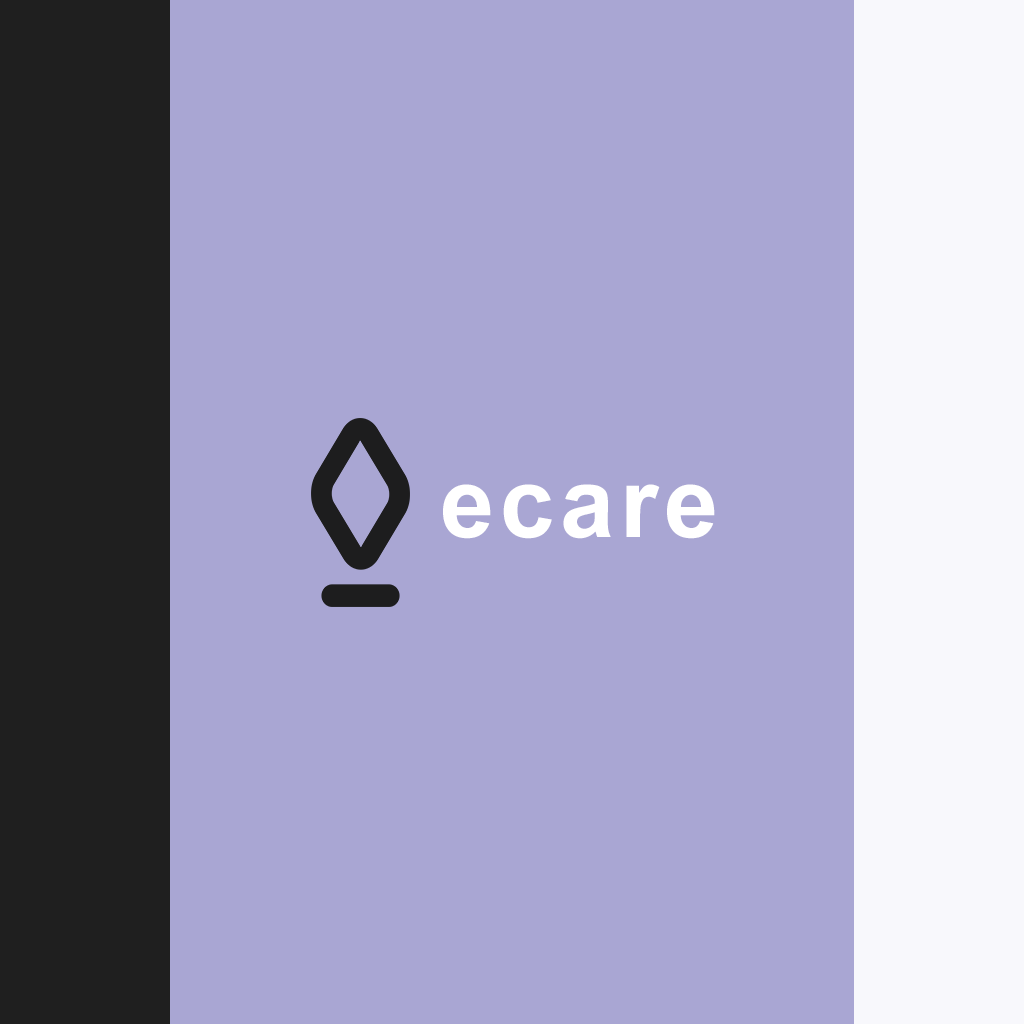
<style>
.page{position:relative;width:1024px;height:1024px;background:#a9a6d3}
.page>*{position:absolute;margin:0}
.t1{font:98.8px "Arial-BoldMT";letter-spacing:0.06em;color:#ffffff}
</style>
<div class="page">
<p class="t1" style="left:443px;top:484px;width:272px;height:55px">ecare</p>
</div>
